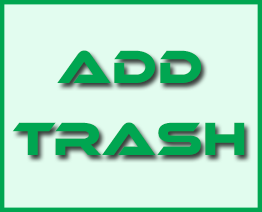
<style>
.page{position:relative;width:262px;height:212px;background:#e1fcee}
.page>*{position:absolute;margin:0}
.t1{font:48px/72px "EthnocentricRg-Regular";color:#00a651}
</style>
<div class="page">
<p class="t1" style="left:12px;top:50px;width:233px;height:105px;text-align:center">add<br>trash</p>
</div>
